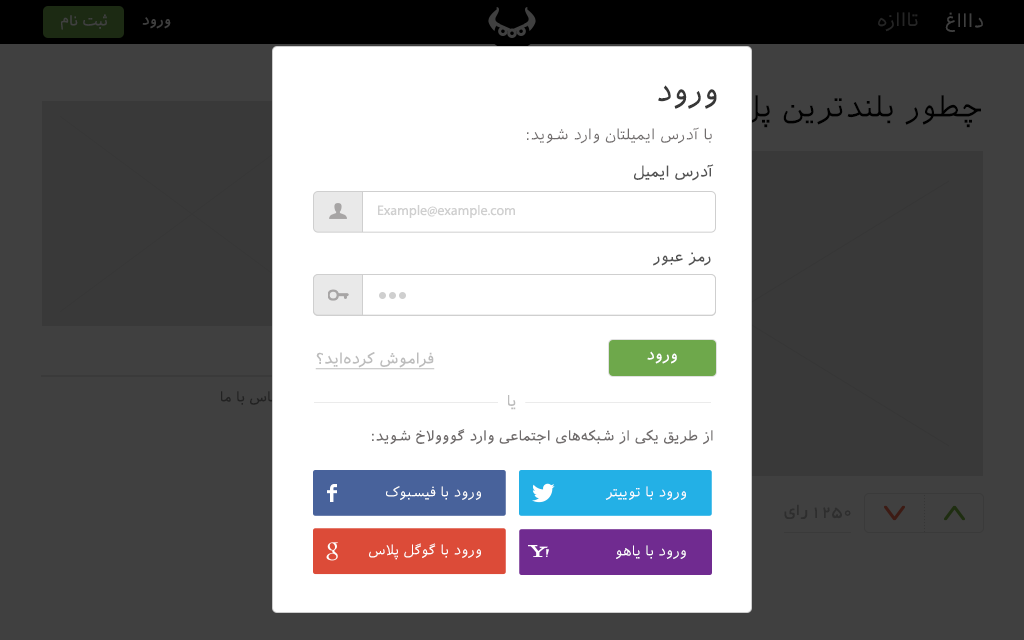
<style>
.page{position:relative;width:1024px;height:640px;background:#ffffff}
.page>*{position:absolute;margin:0}
.t1{font:14px "AIranianSans";color:#404040}
.t2{font:19px "AIranianSans";color:#252525}
.t3{font:19px "AIranianSans";color:#404040}
.t4{font:30px "AIranianSans";color:#373737}
.t5{font:15px "AIranianSans";color:#716d6d}
.t6{font:15px "AIranianSans";color:#535353}
.t7{font:14px "MyriadPro-Regular";color:#cfcfcf}
.t8{font:15px "AIranianSans";color:#bcbcbc;text-decoration:underline}
.t9{font:15px "AIranianSans";color:#ffffff}
.t10{font:15px "AIranianSans";color:#bcbcbc}
.t11{font:14px "AIranianSans";color:#716d6d}
.t12{font:13.7px "AIranianSans";color:#ffffff}
.t13{font:18px "BYekan";color:#2e2e2e}
</style>
<div class="page">
<p class="t1" style="left:61px;top:14px;width:46px;height:16px">ثبت نام</p>
<p class="t1" style="left:142px;top:17px;width:29px;height:12px">ورود</p>
<p class="t2" style="left:878px;top:12px;width:40px;height:20px">تااازه</p>
<p class="t3" style="left:945px;top:12px;width:38px;height:20px">داااغ</p>
<p class="t4" style="left:658px;top:85px;width:59px;height:24px">ورود</p>
<p class="t5" style="left:527px;top:127px;width:185px;height:17px">با آدرس ایمیلتان وارد شوید:</p>
<p class="t6" style="left:634px;top:164px;width:80px;height:17px">آدرس ایمیل</p>
<p class="t7" style="left:378px;top:205px;width:137px;height:13px">Example@example.com</p>
<p class="t6" style="left:653px;top:252px;width:58px;height:14px">رمز عبور</p>
<p class="t8" style="left:315px;top:352px;width:120px;height:18px">فراموش کرده‌اید؟</p>
<p class="t9" style="left:647px;top:351px;width:30px;height:13px">ورود</p>
<p class="t10" style="left:508px;top:395px;width:8px;height:15px">یا</p>
<p class="t11" style="left:372px;top:429px;width:341px;height:16px">از طریق یکی از شبکه‌های اجتماعی وارد گووولاخ شوید:</p>
<p class="t12" style="left:386px;top:486px;width:95px;height:14px">ورود با فیسبوک</p>
<p class="t12" style="left:605px;top:486px;width:81px;height:14px">ورود با توییتر</p>
<p class="t13" style="left:784px;top:504px;width:24px;height:15px">رای</p>
<p class="t13" style="left:814px;top:507px;width:37px;height:12px">1250</p>
<p class="t12" style="left:369px;top:543px;width:112px;height:17px">ورود با گوگل پلاس</p>
<p class="t12" style="left:616px;top:545px;width:70px;height:14px">ورود با یاهو</p>
</div>
